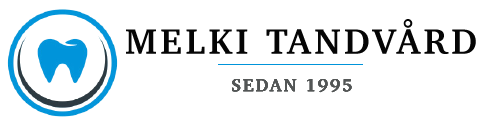
<style>
.page{position:relative;width:490px;height:124px;background:#ffffff}
.page>*{position:absolute;margin:0}
.t1{font:36px "Charter-Bold";letter-spacing:0.1em;color:#050505}
.t2{font:18px "Charter-Bold";letter-spacing:0.1em;color:#535656}
</style>
<div class="page">
<p class="t1" style="left:126px;top:19px;width:350px;height:35px">MELKI TANDVÅRD</p>
<p class="t2" style="left:232px;top:79px;width:120px;height:14px">SEDAN 1995</p>
<p class="t2" style="left:232px;top:79px;width:120px;height:14px">SEDAN 1995</p>
<p class="t2" style="left:232px;top:79px;width:120px;height:14px">SEDAN 1995</p>
<p class="t2" style="left:232px;top:79px;width:120px;height:14px">SEDAN 1995</p>
</div>
